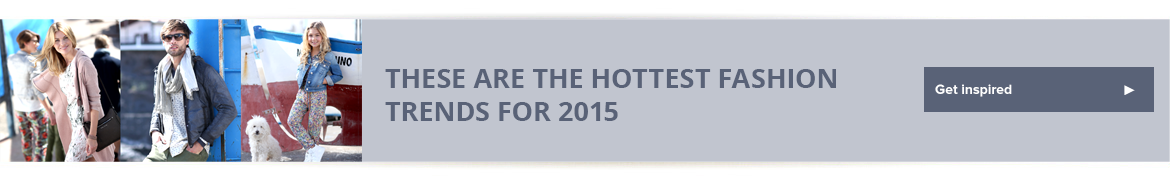
<style>
.page{position:relative;width:1170px;height:182px;background:#c1c5cf}
.page>*{position:absolute;margin:0}
.t1{font:27px "OpenSans-Bold";color:#596277;text-transform:uppercase}
.t2{font:14px "ProximaNova-Bold";color:#ffffff}
.t3{font:14px "Arial-BoldMT";color:#ffffff}
</style>
<div class="page">
<p class="t1" style="left:385px;top:69px;width:451px;height:52px">These are the hottest fashion <br>trends for 2015</p>
<p class="t2" style="left:935px;top:84px;width:77px;height:13px">Get inspired</p>
<p class="t3" style="left:1124px;top:85px;width:11px;height:10px">►</p>
</div>
